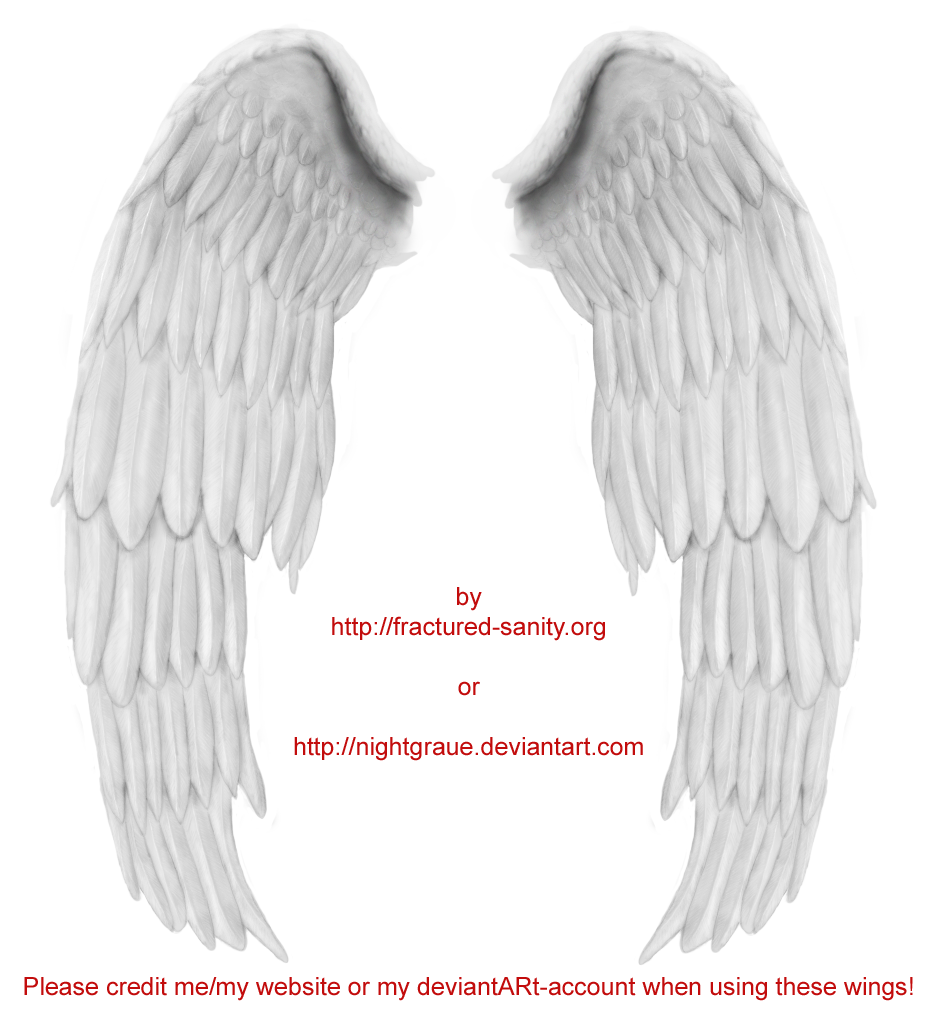
<style>
.page{position:relative;width:944px;height:1022px;background:#ffffff}
.page>*{position:absolute;margin:0}
.t1{font:25px "ArialMT";color:#c20c0c}
</style>
<div class="page">
<p class="t1" style="left:24px;top:587px;width:889px;height:414px;text-align:center">by <br>http://fractured-sanity.org<br><br>or<br><br>http://nightgraue.deviantart.com<br><br><br><br><br><br><br><br>Please credit me/my website or my deviantARt-account when using these wings!</p>
</div>
